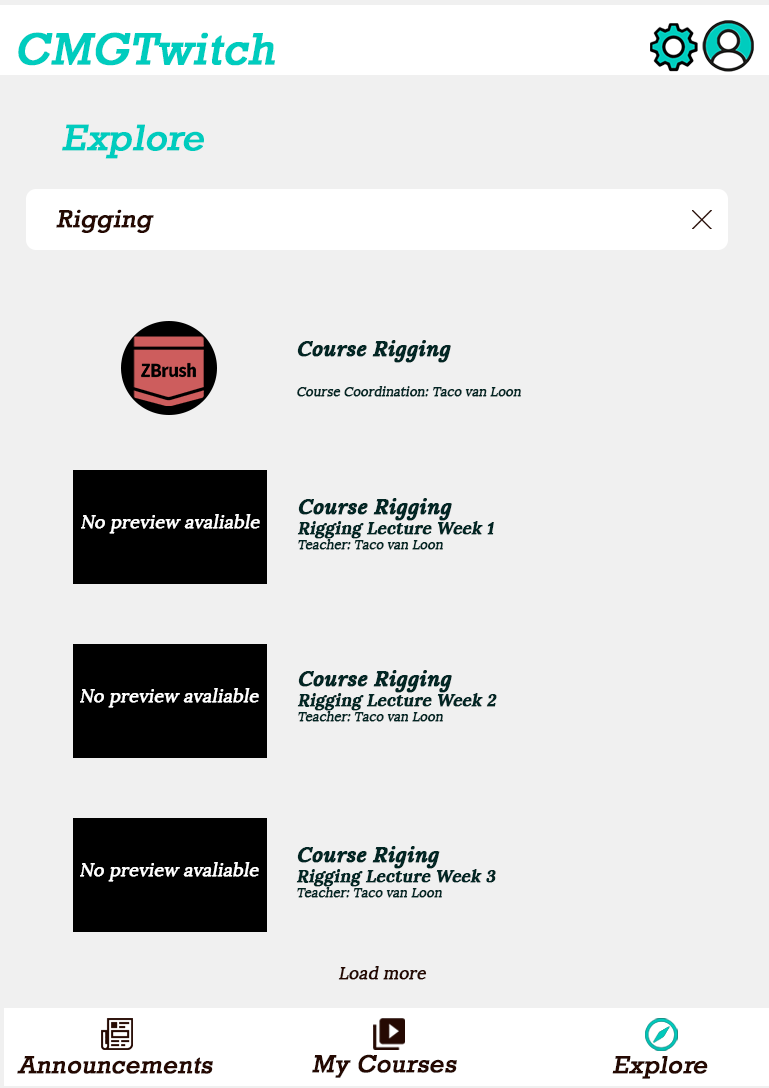
<style>
.page{position:relative;width:769px;height:1088px;background:#f0f0f0}
.page>*{position:absolute;margin:0}
.t1{font:45.4px "Rockwell";color:#00ccbe;font-weight:bold;font-style:italic}
.t2{font:37.5px "Rockwell";color:#00ccbe;font-weight:bold;font-style:italic}
.t3{font:25px "Rockwell";color:#250902;font-weight:bold;font-style:italic}
.t4{font:12.5px "Lora-Regular";color:#022624;font-weight:bold;font-style:italic}
.t5{font:20.8px "Lora-BoldItalic";color:#022624;font-weight:bold;font-style:italic}
.t6{font:16.7px "Lora-Bold";color:#022624;font-weight:bold;font-style:italic}
.t7{font:17.7px "Lora-Regular";color:#ffffff;font-weight:bold;font-style:italic}
.t8{font:16.7px "Lora-Regular";color:#250902;font-weight:bold;font-style:italic}
</style>
<div class="page">
<p class="t1" style="left:18px;top:32px;width:257px;height:34px">CMGTwitch</p>
<p class="t2" style="left:62px;top:124px;width:142px;height:35px">Explore</p>
<p class="t3" style="left:56px;top:209px;width:98px;height:24px">Rigging</p>
<p class="t4" style="left:297px;top:340px;width:224px;height:57px"><span class="t5">Course Rigging<br><br></span>Course Coordination: Taco van Loon</p>
<p class="t6" style="left:297px;top:498px;width:197px;height:52px"><span class="t5">Course Rigging<br></span>Rigging Lecture Week 1<br><span class="t4">Teacher: Taco van Loon</span></p>
<p class="t7" style="left:81px;top:514px;width:179px;height:20px">No preview avaliable</p>
<p class="t6" style="left:297px;top:670px;width:200px;height:52px"><span class="t5">Course Rigging<br></span>Rigging Lecture Week 2<br><span class="t4">Teacher: Taco van Loon</span></p>
<p class="t7" style="left:80px;top:688px;width:179px;height:20px">No preview avaliable</p>
<p class="t6" style="left:296px;top:846px;width:200px;height:52px"><span class="t5">Course Riging<br></span>Rigging Lecture Week 3<br><span class="t4">Teacher: Taco van Loon</span></p>
<p class="t7" style="left:80px;top:862px;width:179px;height:20px">No preview avaliable</p>
<p class="t8" style="left:338px;top:966px;width:89px;height:14px">Load more</p>
<p class="t3" style="left:17px;top:1056px;width:196px;height:18px">Announcements</p>
<p class="t3" style="left:312px;top:1054px;width:145px;height:24px">My Courses</p>
<p class="t3" style="left:612px;top:1056px;width:96px;height:23px">Explore</p>
</div>
